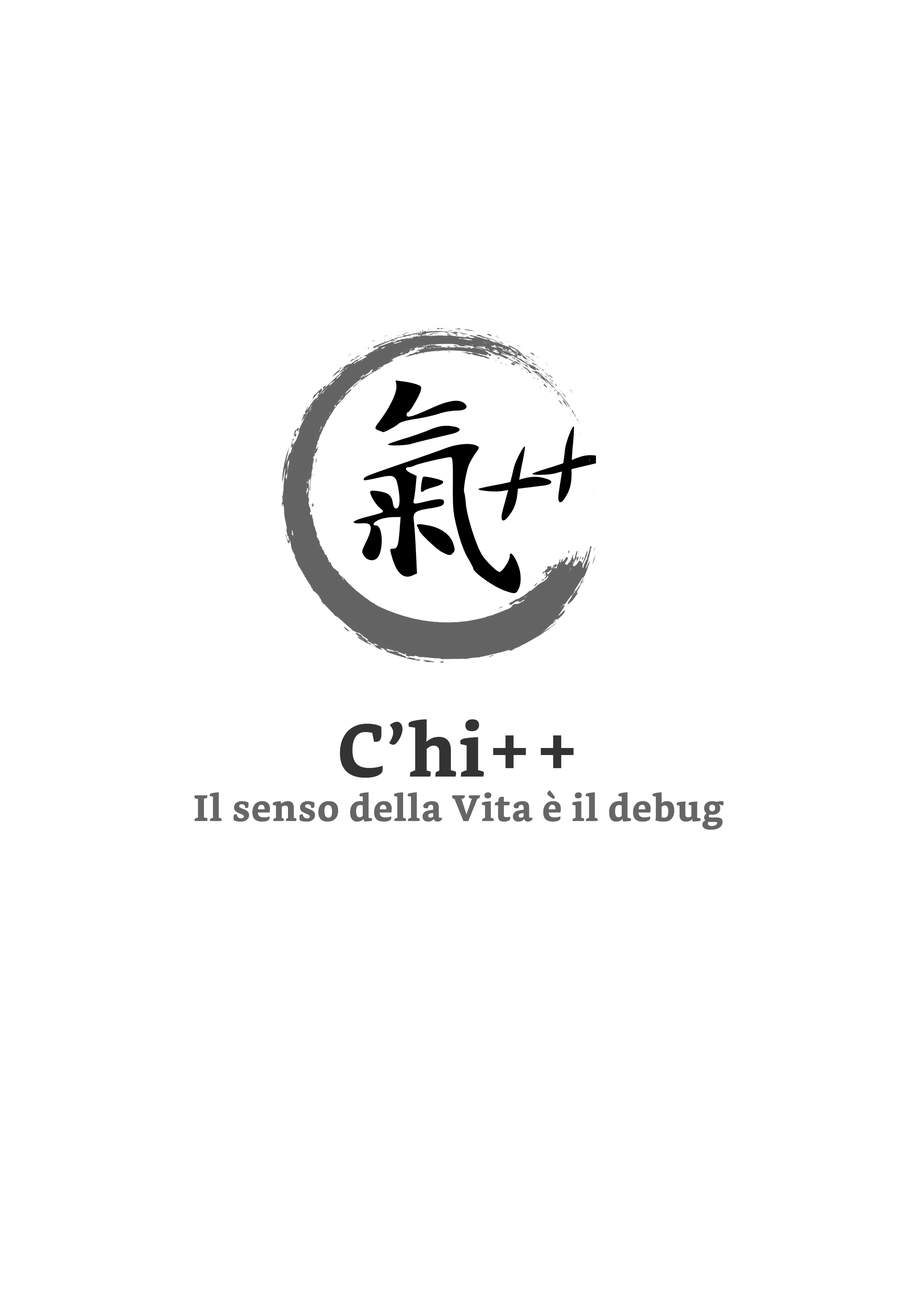
<style>
.page{position:relative;width:918px;height:1299px;background:#ffffff}
.page>*{position:absolute;margin:0}
.t1{font:37px "Bookerly-Bold";letter-spacing:0.02em;color:#666666}
.t2{font:74px "Bookerly-Bold";letter-spacing:0.02em;color:#333333}
</style>
<div class="page">
<p class="t1" style="left:194px;top:719px;width:530px;height:111px;text-align:center"><span class="t2">C’hi++<br></span>Il senso della Vita è il debug</p>
</div>
